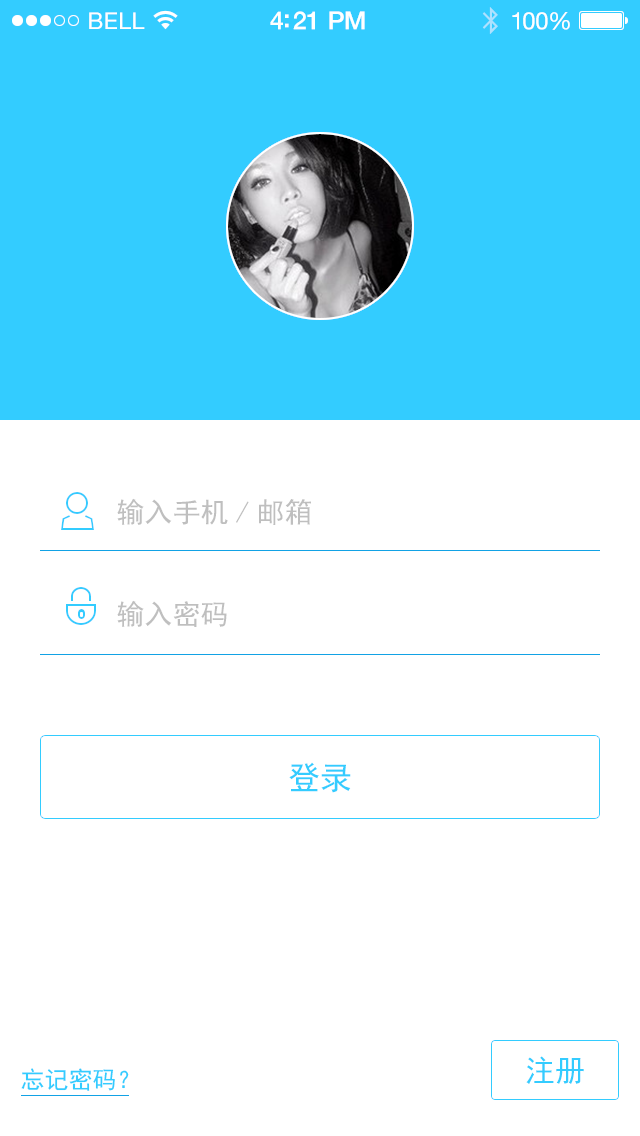
<style>
.page{position:relative;width:640px;height:1136px;background:#ffffff}
.page>*{position:absolute;margin:0}
.t1{font:28px "SimHei";color:#bfbfbf}
.t2{font:32px "SimHei";color:#33ccff}
.t3{font:30px "SimHei";color:#33ccff}
.t4{font:24px "SimHei";color:#33ccff}
</style>
<div class="page">
<p class="t1" style="left:117px;top:498px;width:194px;height:27px">输入手机/邮箱</p>
<p class="t1" style="left:117px;top:600px;width:110px;height:27px">输入密码</p>
<p class="t2" style="left:289px;top:762px;width:62px;height:31px">登录</p>
<p class="t3" style="left:526px;top:1056px;width:58px;height:28px">注册</p>
<p class="t4" style="left:21px;top:1068px;width:108px;height:23px">忘记密码？</p>
</div>
